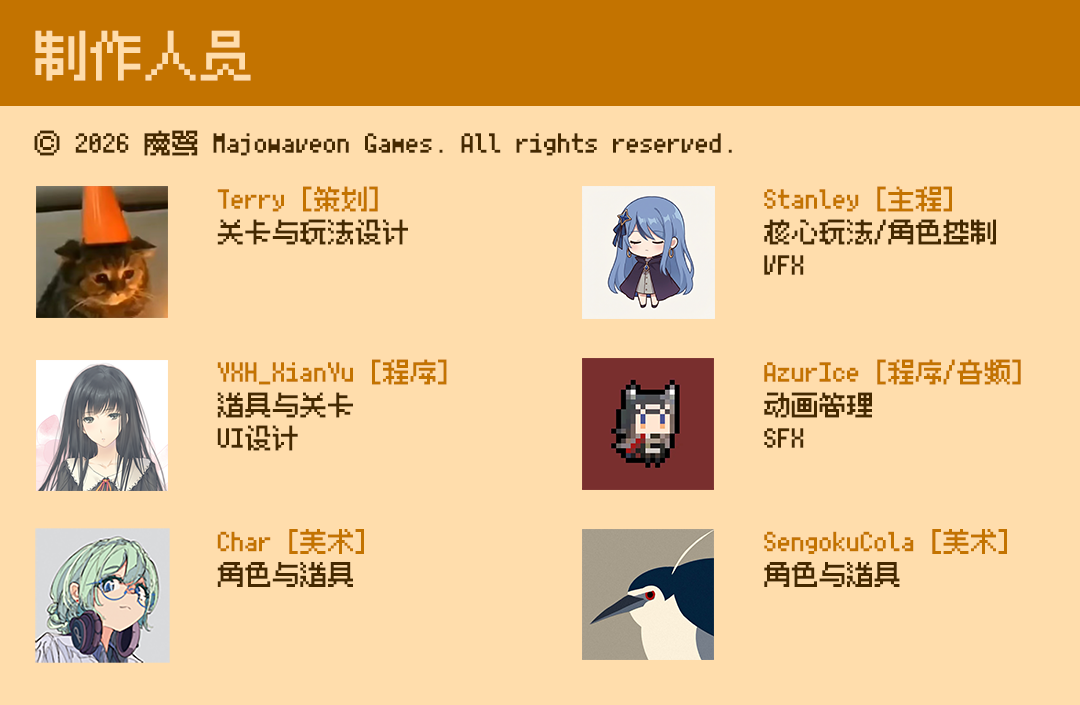
<style>
.page{position:relative;width:1080px;height:705px;background:#ffddac}
.page>*{position:absolute;margin:0}
.t1{font:55.1px "Fusion-Pixel-10px-M-zh_hans-Regular";color:#ffddac}
.t2{font:27.5px "Fusion-Pixel-10px-M-zh_hans-Regular";color:#452900}
.t3{font:27.5px "Fusion-Pixel-10px-M-zh_hans-Regular";color:#c37300}
</style>
<div class="page">
<p class="t1" style="left:35px;top:30px;width:216px;height:51px">制作人员</p>
<p class="t2" style="left:34px;top:130px;width:698px;height:26px">© 2026 魔鹭 Majowaveon Games. All rights reserved.</p>
<p class="t3" style="left:217px;top:186px;width:191px;height:59px">Terry [策划]<br><span class="t2">关卡与玩法设计</span></p>
<p class="t2" style="left:764px;top:186px;width:232px;height:89px"><span class="t3">Stanley [主程]<br></span>核心玩法/角色控制<br>VFX</p>
<p class="t3" style="left:217px;top:359px;width:230px;height:92px">YXH_XianYu [程序]<br><span class="t2">道具与关卡<br>UI设计</span></p>
<p class="t3" style="left:764px;top:359px;width:257px;height:89px">AzurIce [程序/音频]<br><span class="t2">动画管理<br>SFX</span></p>
<p class="t3" style="left:217px;top:529px;width:147px;height:58px">Char [美术]<br><span class="t2">角色与道具</span></p>
<p class="t3" style="left:764px;top:529px;width:243px;height:58px">SengokuCola [美术]<br><span class="t2">角色与道具</span></p>
</div>
